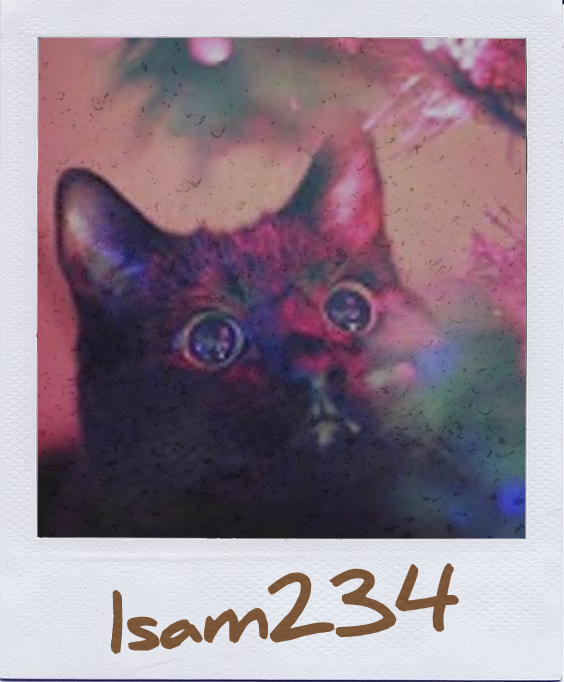
<style>
.page{position:relative;width:564px;height:682px}
.page>*{position:absolute;margin:0}
.t1{font:72px "DanielBlack";letter-spacing:-0.04em;color:#6f4e37}
</style>
<div class="page">
<p class="t1" style="left:110px;top:563px;width:349px;height:91px;rotate:-4deg">1sam234</p>
</div>
